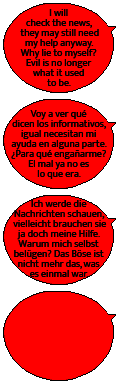
<style>
.page{position:relative;width:120px;height:384px;background:#ff0000}
.page>*{position:absolute;margin:0}
.t1{font:10px/10px "MuktaVaani-Regular";color:#000000}
</style>
<div class="page">
<p class="t1" style="left:11px;top:9px;width:96px;height:268px;text-align:center">I will<br>check the news,<br> they may still need<br>my help anyway.<br>Why lie to myself?<br>Evil is no longer<br>what it used<br>to be.<br><br><br>Voy a ver qué<br>dicen los informativos,<br>igual necesitan mi<br>ayuda en alguna parte.<br>¿Para qué engañarme?<br>El mal ya no es<br>lo que era.<br><br><br>Ich werde die<br>Nachrichten schauen,<br> vielleicht brauchen sie<br>ja doch meine Hilfe.<br>Warum mich selbst<br>belügen? Das Böse ist<br>nicht mehr das, was<br>es einmal war.</p>
</div>
